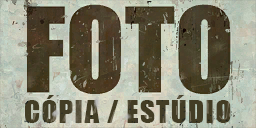
<style>
.page{position:relative;width:256px;height:128px}
.page>*{position:absolute;margin:0}
.t1{font:28.9px "Impact";letter-spacing:0.05em;color:#433d25}
</style>
<div class="page">
<p class="t1" style="left:25px;top:95px;width:206px;height:28px">CÓPIA / ESTÚDIO</p>
</div>
